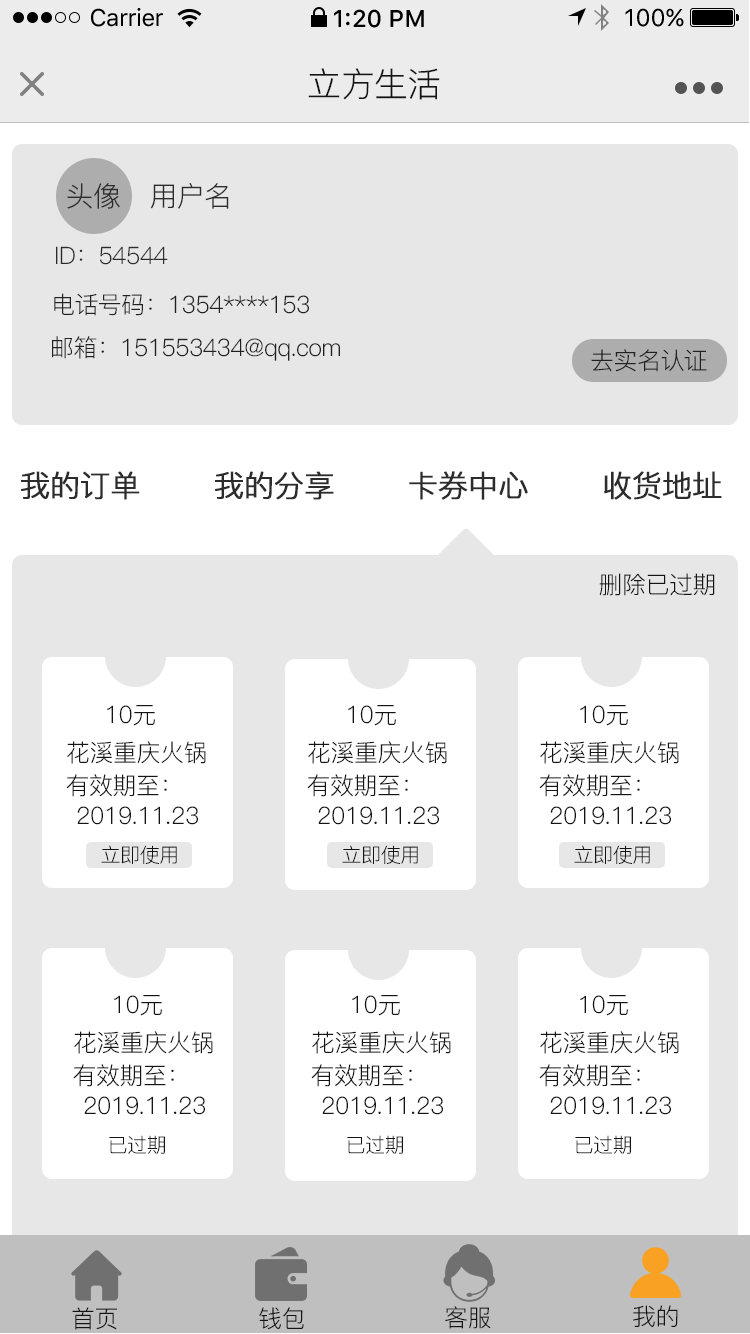
<style>
.page{position:relative;width:750px;height:1334px;background:#e7e7e7}
.page>*{position:absolute;margin:0}
.t1{font:24px "SFUIText-Regular";letter-spacing:-0.025em;color:#000000}
.t2{font:24px "SFUIText-Medium";color:#000000}
.t3{font:24px "SFUIText-Regular";color:#000000}
.t4{font:34px "PingFang-SC-Regular";letter-spacing:-0.02em;color:#141414}
.t5{font:28px "PingFang-SC-Regular";letter-spacing:-0.024em;color:#2c2c2c}
.t6{font:24px "PingFang-SC-Regular";letter-spacing:-0.024em;color:#2c2c2c}
.t7{font:24px "PingFang-SC-Regular";letter-spacing:-0.024em;color:#212121}
.t8{font:30px "PingFang-SC-Regular";letter-spacing:-0.024em;color:#2c2c2c;font-weight:bold}
.t9{font:24px "PingFang-SC-Regular";letter-spacing:-0.02em;color:#141414}
.t10{font:20px "PingFang-SC-Regular";letter-spacing:-0.02em;color:#141414}
</style>
<div class="page">
<p class="t1" style="left:91px;top:8px;width:72px;height:19px">Carrier</p>
<p class="t2" style="left:334px;top:9px;width:90px;height:19px">1:20 PM</p>
<p class="t3" style="left:625px;top:8px;width:59px;height:19px">100%</p>
<p class="t4" style="left:308px;top:68px;width:132px;height:32px">立方生活</p>
<p class="t5" style="left:67px;top:183px;width:53px;height:26px">头像</p>
<p class="t5" style="left:150px;top:183px;width:79px;height:26px">用户名</p>
<p class="t6" style="left:56px;top:246px;width:112px;height:19px">ID：54544</p>
<p class="t7" style="left:54px;top:293px;width:255px;height:23px">电话号码：1354****153</p>
<p class="t7" style="left:52px;top:336px;width:288px;height:25px">邮箱：151553434@qq.com</p>
<p class="t7" style="left:591px;top:349px;width:116px;height:23px">去实名认证</p>
<p class="t8" style="left:21px;top:471px;width:119px;height:29px">我的订单</p>
<p class="t8" style="left:215px;top:471px;width:119px;height:29px">我的分享</p>
<p class="t8" style="left:409px;top:471px;width:119px;height:29px">卡券中心</p>
<p class="t8" style="left:604px;top:471px;width:118px;height:29px">收货地址</p>
<p class="t9" style="left:599px;top:573px;width:116px;height:23px">删除已过期</p>
<p class="t9" style="left:107px;top:705px;width:48px;height:21px">10元</p>
<p class="t9" style="left:348px;top:705px;width:48px;height:21px">10元</p>
<p class="t9" style="left:580px;top:705px;width:48px;height:21px">10元</p>
<p class="t9" style="left:67px;top:741px;width:139px;height:23px">花溪重庆火锅</p>
<p class="t9" style="left:308px;top:741px;width:139px;height:23px">花溪重庆火锅</p>
<p class="t9" style="left:540px;top:741px;width:139px;height:23px">花溪重庆火锅</p>
<p class="t9" style="left:66px;top:774px;width:101px;height:23px">有效期至：</p>
<p class="t9" style="left:307px;top:774px;width:101px;height:23px">有效期至：</p>
<p class="t9" style="left:539px;top:774px;width:101px;height:23px">有效期至：</p>
<p class="t9" style="left:77px;top:806px;width:121px;height:19px">2019.11.23</p>
<p class="t9" style="left:318px;top:806px;width:121px;height:19px">2019.11.23</p>
<p class="t9" style="left:550px;top:806px;width:121px;height:19px">2019.11.23</p>
<p class="t10" style="left:101px;top:845px;width:76px;height:19px">立即使用</p>
<p class="t10" style="left:342px;top:845px;width:76px;height:19px">立即使用</p>
<p class="t10" style="left:574px;top:845px;width:76px;height:19px">立即使用</p>
<p class="t9" style="left:114px;top:995px;width:48px;height:21px">10元</p>
<p class="t9" style="left:352px;top:995px;width:48px;height:21px">10元</p>
<p class="t9" style="left:580px;top:995px;width:48px;height:21px">10元</p>
<p class="t9" style="left:74px;top:1031px;width:139px;height:23px">花溪重庆火锅</p>
<p class="t9" style="left:312px;top:1031px;width:139px;height:23px">花溪重庆火锅</p>
<p class="t9" style="left:540px;top:1031px;width:139px;height:23px">花溪重庆火锅</p>
<p class="t9" style="left:73px;top:1064px;width:101px;height:23px">有效期至：</p>
<p class="t9" style="left:311px;top:1064px;width:101px;height:23px">有效期至：</p>
<p class="t9" style="left:539px;top:1064px;width:101px;height:23px">有效期至：</p>
<p class="t9" style="left:84px;top:1096px;width:121px;height:19px">2019.11.23</p>
<p class="t9" style="left:322px;top:1096px;width:121px;height:19px">2019.11.23</p>
<p class="t9" style="left:550px;top:1096px;width:121px;height:19px">2019.11.23</p>
<p class="t10" style="left:109px;top:1135px;width:56px;height:19px">已过期</p>
<p class="t10" style="left:347px;top:1135px;width:56px;height:19px">已过期</p>
<p class="t10" style="left:575px;top:1135px;width:56px;height:19px">已过期</p>
<p class="t9" style="left:72px;top:1307px;width:45px;height:23px">首页</p>
<p class="t9" style="left:259px;top:1307px;width:45px;height:23px">钱包</p>
<p class="t9" style="left:445px;top:1306px;width:46px;height:23px">客服</p>
<p class="t9" style="left:633px;top:1305px;width:45px;height:22px">我的</p>
</div>
